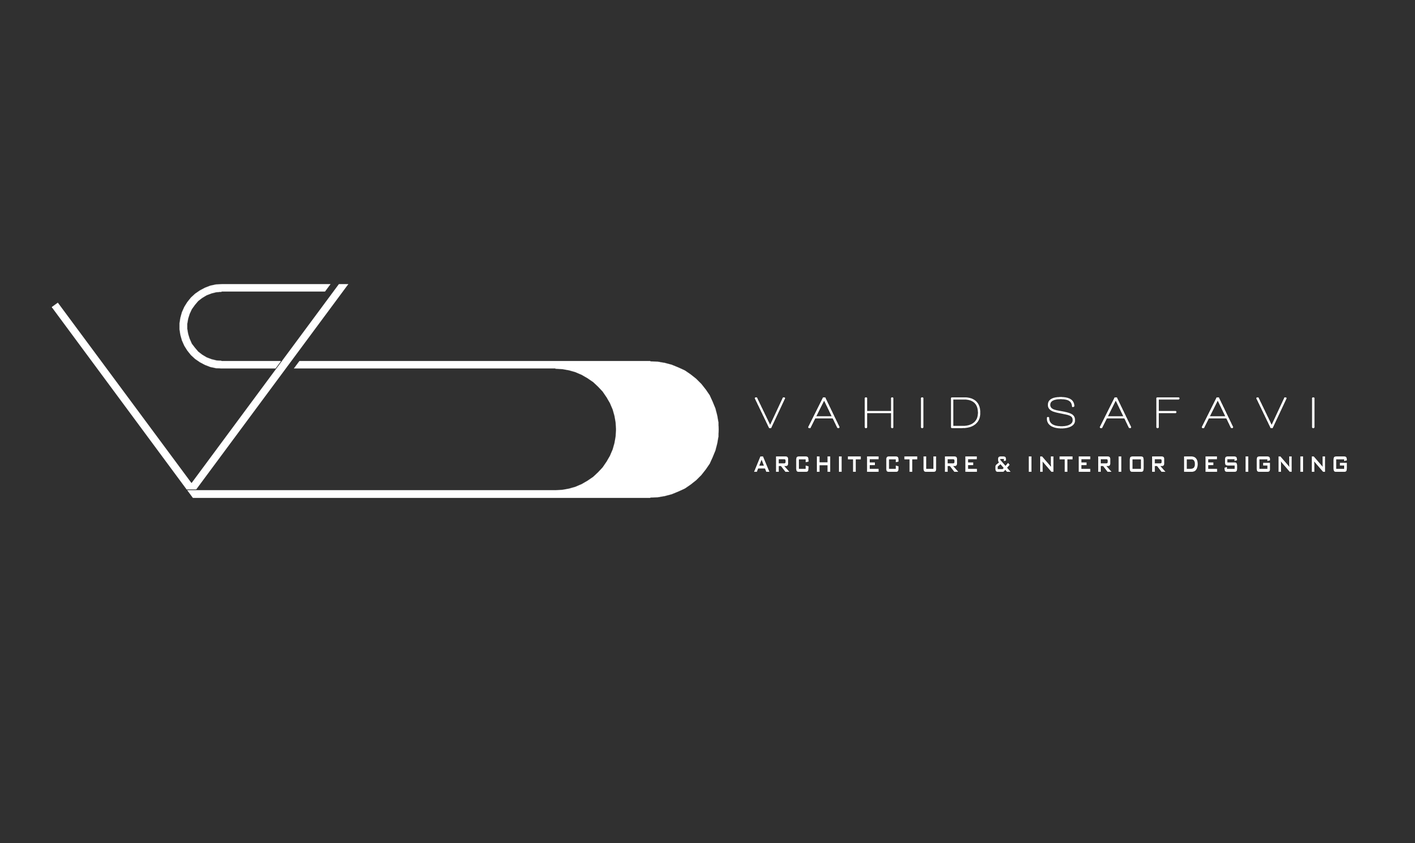
<style>
.page{position:relative;width:1415px;height:843px;background:#303030}
.page>*{position:absolute;margin:0}
.t1{font:43.4px "Walkway";letter-spacing:0.46em;color:#ffffff;font-weight:bold;scale:1.11 1}
.t2{font:29.6px "BankGothicBT-Medium";letter-spacing:0.15em;color:#ffffff;scale:0.72 1}
</style>
<div class="page">
<p class="t1" style="left:755px;top:397px;width:560px;height:32px">VAHID SAFAVI</p>
<p class="t2" style="left:754px;top:456px;width:593px;height:16px">ARCHITECTURE &amp; INTERIOR DESIGNING</p>
</div>
